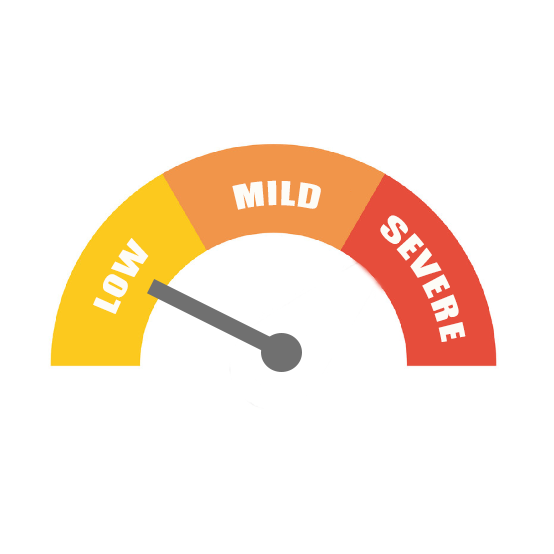
<style>
.page{position:relative;width:554px;height:554px;background:#ffffff}
.page>*{position:absolute;margin:0}
.t1{font:30px "Impact";color:#fdfcf7}
</style>
<div class="page">
<p class="t1" style="left:232px;top:180px;width:89px;height:30px">MILD</p>
<p class="t1" style="left:380px;top:215px;width:86px;height:127px;rotate:60deg">SEVERE</p>
<p class="t1" style="left:93px;top:238px;width:56px;height:76px;rotate:-60deg">LOW</p>
</div>
